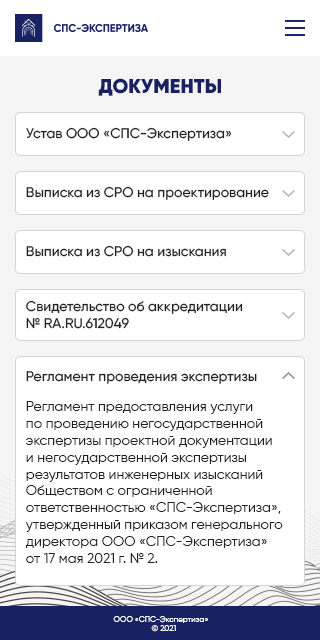
<style>
.page{position:relative;width:320px;height:640px;background:#ffffff}
.page>*{position:absolute;margin:0}
.t1{font:20px "Gilroy-Black";color:#182263}
.t2{font:14px "Gilroy-Medium";color:#212121}
.t3{font:14px "Gilroy-Regular";color:#212121}
.t4{font:14px/30px "Gilroy-Medium";color:#212121}
.t5{font:14px/30px "Gilroy-Regular";color:#212121}
.t6{font:8px "Gilroy-Regular";color:#ffffff}
</style>
<div class="page">
<p class="t1" style="left:98px;top:78px;width:123px;height:18px">ДОКУМЕНТЫ</p>
<p class="t2" style="left:26px;top:127px;width:206px;height:14px">Устав ООО «СПС-Экспертиза»</p>
<p class="t2" style="left:26px;top:186px;width:243px;height:14px">Выписка из СРО на проектирование</p>
<p class="t2" style="left:26px;top:245px;width:200px;height:12px">Выписка из СРО на изыскания</p>
<p class="t2" style="left:26px;top:300px;width:217px;height:29px">Свидетельство об аккредитации <br>№ RA.RU.612049</p>
<p class="t3" style="left:25px;top:371px;width:258px;height:192px"><span class="t2">Регла</span><span class="t4">мент проведения экспертизы<br></span><span class="t5">Реглам</span>ент предоставления услуги <br>по проведению негосударственной <br>экспертизы проектной документации <br>и негосударственной экспертизы <br>результатов инженерных изысканий <br>Обществом с ограниченной <br>ответственностью «СПС-Экспертиза», <br>утвержденный приказом генерального <br>директора ООО «СПС-Экспертиза» <br>от 17 мая 2021 г. № 2.</p>
<p class="t6" style="left:113px;top:616px;width:95px;height:16px;text-align:center">ООО «СПС-Экспертиза»   <br>© 2021</p>
</div>
